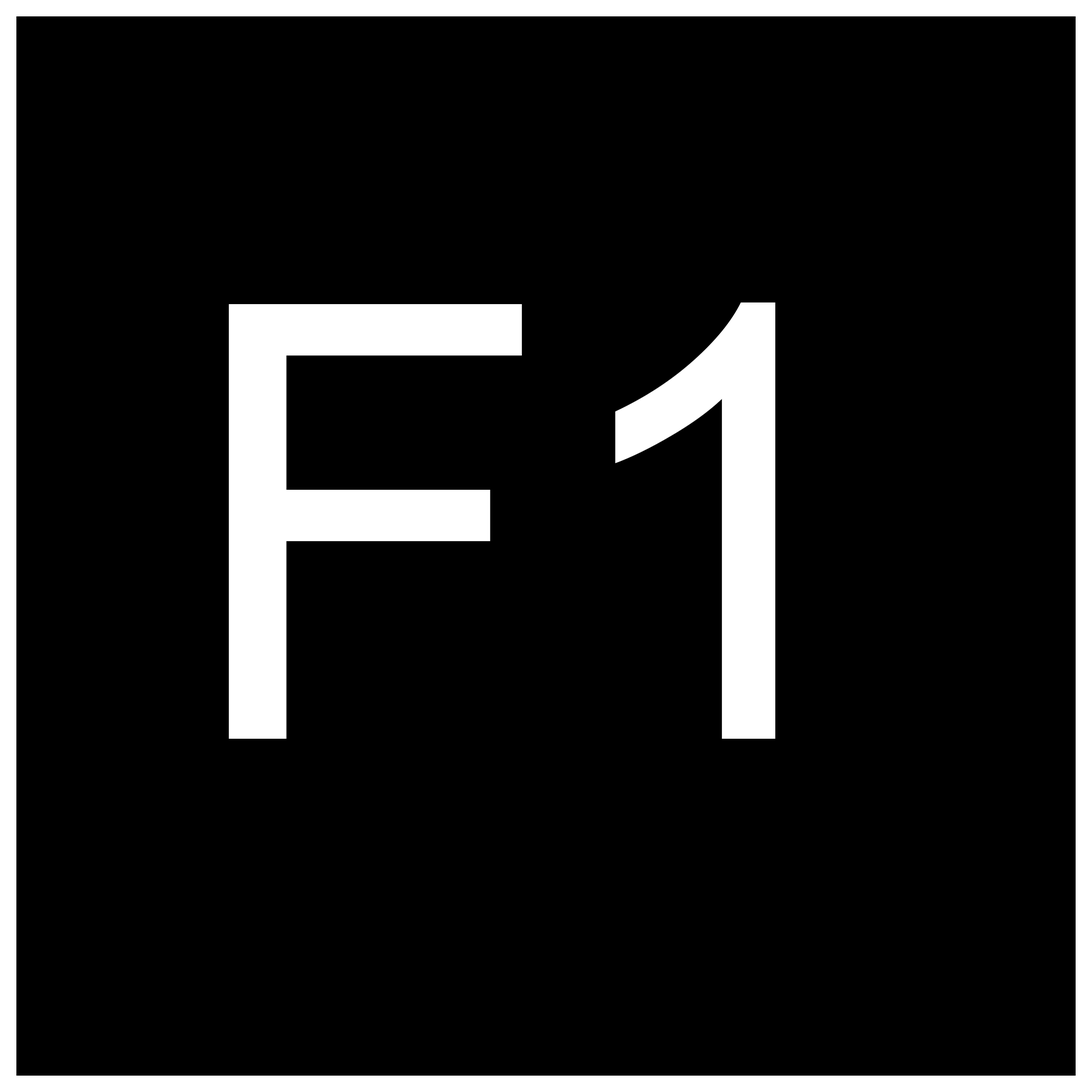
<style>
.page{position:relative;width:1092px;height:1092px;background:#000000}
.page>*{position:absolute;margin:0}
.t1{font:606.7px "ArialMT";color:#ffffff}
</style>
<div class="page">
<p class="t1" style="left:229px;top:302px;width:546px;height:437px">F1</p>
</div>
